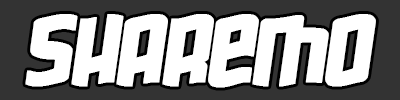
<style>
.page{position:relative;width:400px;height:100px;background:#ffffff}
.page>*{position:absolute;margin:0}
.t1{font:100px "Gimmicky";letter-spacing:-0.075em;color:#ffffff;font-weight:bold}
</style>
<div class="page">
<p class="t1" style="left:25px;top:14px;width:351px;height:74px">sharEmo</p>
</div>
